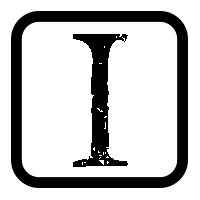
<style>
.page{position:relative;width:200px;height:200px;background:#ffffff}
.page>*{position:absolute;margin:0}
.t1{font:150px "Portmanteau-Regular";letter-spacing:-0.06em;color:#000000;font-variant:small-caps}
</style>
<div class="page">
<p class="t1" style="left:73px;top:34px;width:55px;height:133px">I</p>
</div>
